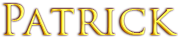
<style>
.page{position:relative;width:180px;height:40px;background:#ffffff}
.page>*{position:absolute;margin:0}
.t1{font:41px "TrajanPro-Regular"}
</style>
<div class="page">
<p class="t1" style="left:3px;top:4px;width:175px;height:31px">Patrick</p>
</div>
